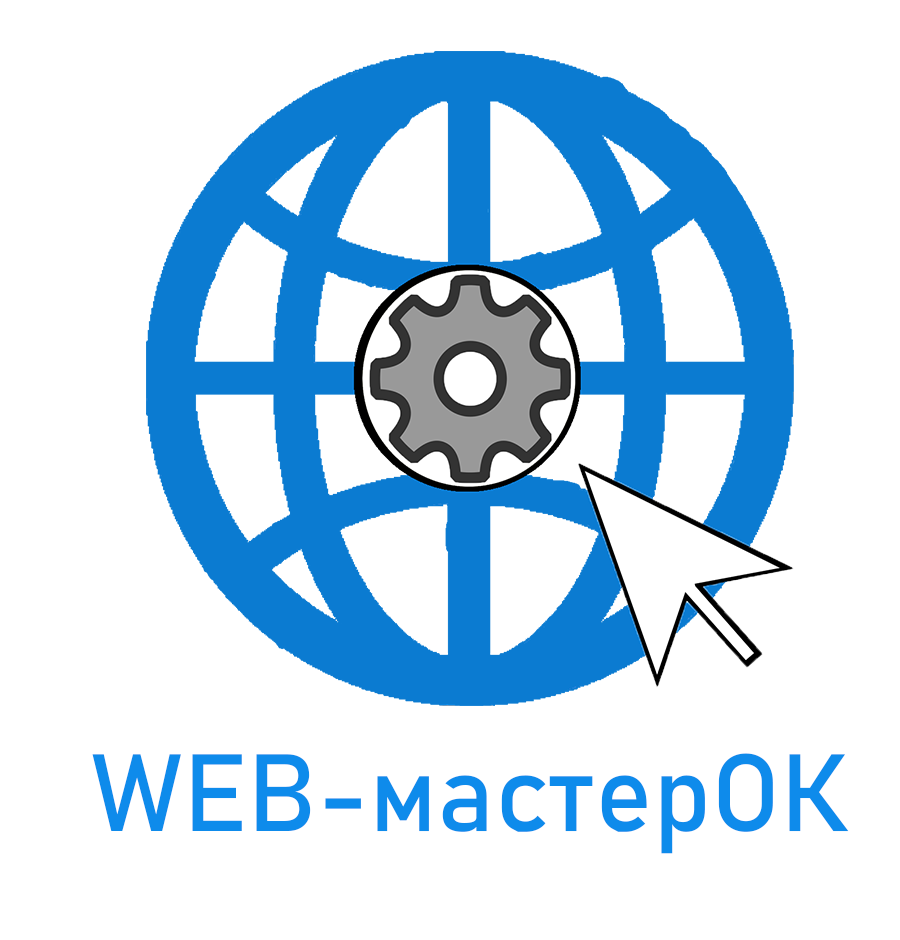
<style>
.page{position:relative;width:900px;height:940px;background:#ffffff}
.page>*{position:absolute;margin:0}
.t1{font:108px "Bahnschrift";color:#0e8beb}
</style>
<div class="page">
<p class="t1" style="left:92px;top:753px;width:757px;height:101px">WEB-мастерОК</p>
</div>
